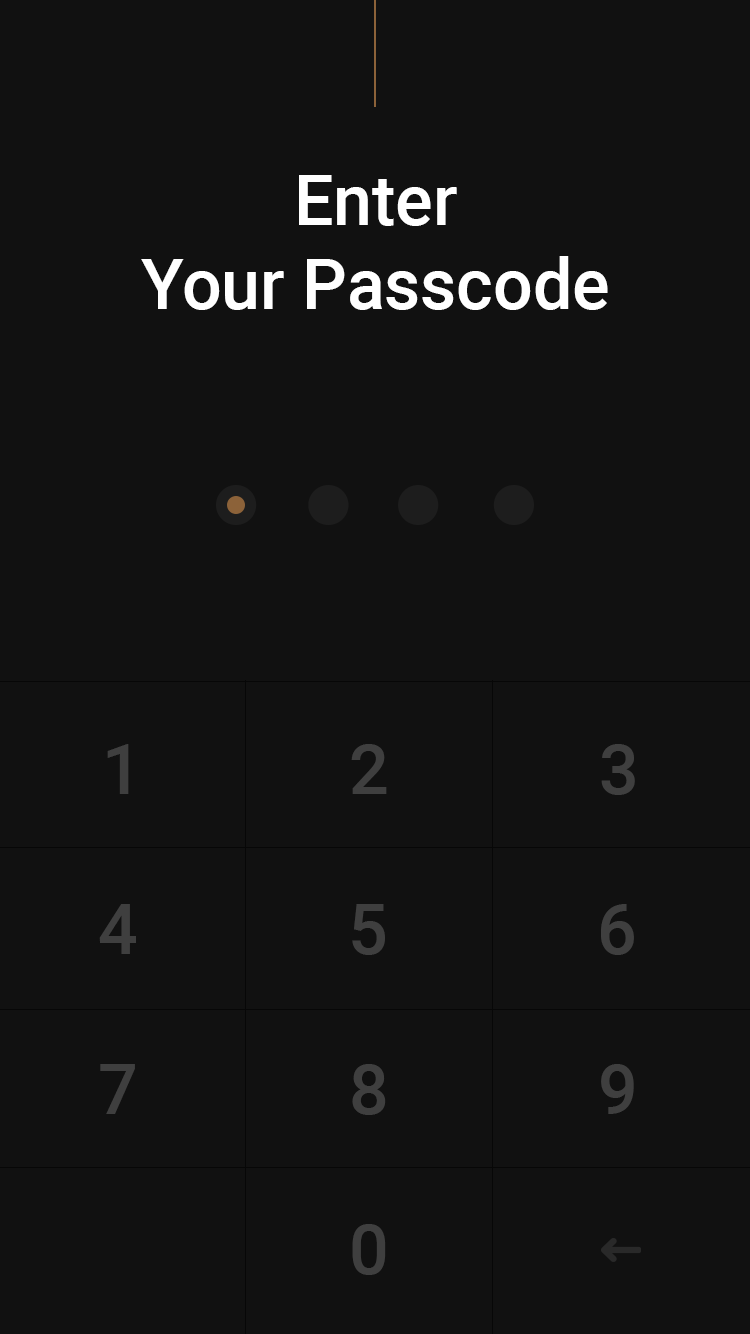
<style>
.page{position:relative;width:750px;height:1334px;background:#111111}
.page>*{position:absolute;margin:0}
.t1{font:69.9px "Roboto-Medium";color:#ffffff}
.t2{font:69.9px "Roboto-Medium";color:#3f3f3f}
</style>
<div class="page">
<p class="t1" style="left:141px;top:175px;width:467px;height:135px;text-align:center">Enter<br>Your Passcode</p>
<p class="t2" style="left:107px;top:744px;width:22px;height:50px">1</p>
<p class="t2" style="left:351px;top:744px;width:36px;height:50px">2</p>
<p class="t2" style="left:601px;top:744px;width:34px;height:51px">3</p>
<p class="t2" style="left:99px;top:904px;width:37px;height:50px">4</p>
<p class="t2" style="left:352px;top:904px;width:33px;height:51px">5</p>
<p class="t2" style="left:601px;top:904px;width:33px;height:51px">6</p>
<p class="t2" style="left:100px;top:1064px;width:35px;height:50px">7</p>
<p class="t2" style="left:352px;top:1064px;width:34px;height:51px">8</p>
<p class="t2" style="left:601px;top:1064px;width:33px;height:50px">9</p>
<p class="t2" style="left:352px;top:1224px;width:34px;height:51px">0</p>
</div>
